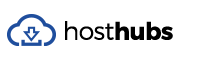
<style>
.page{position:relative;width:200px;height:60px;background:#ffffff}
.page>*{position:absolute;margin:0}
.t1{font:25px "Montserrat-Light";letter-spacing:-0.02em;color:#000000}
.t2{font:24px "Montserrat-Bold";letter-spacing:-0.02em;color:#000000}
</style>
<div class="page">
<p class="t1" style="left:65px;top:21px;width:108px;height:19px">host<span class="t2">hubs</span></p>
</div>
